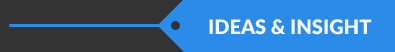
<style>
.page{position:relative;width:395px;height:52px;background:#2b8be9}
.page>*{position:absolute;margin:0}
.t1{font:20px "Lato-Black";color:#f7f7f7}
</style>
<div class="page">
<p class="t1" style="left:209px;top:19px;width:163px;height:16px">IDEAS &amp; INSIGHT</p>
</div>
